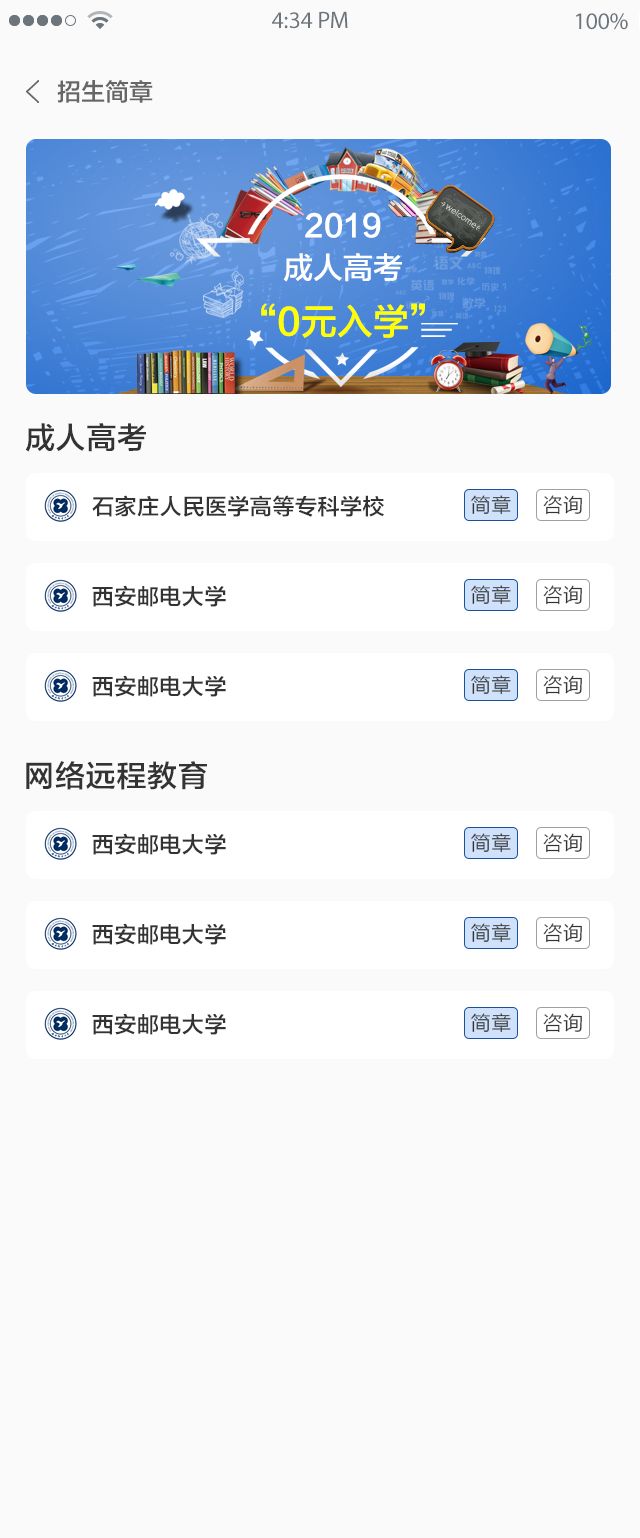
<style>
.page{position:relative;width:640px;height:1538px;background:#fafafa}
.page>*{position:absolute;margin:0}
.t1{font:24px "MyriadPro-Regular";color:#6c757b}
.t2{font:24px "FZLTZHK--GBK1-0";color:#666666}
.t3{font:30px "FZLTZHK--GBK1-0";letter-spacing:0.025em;color:#333333}
.t4{font:22px "FZLTZHK--GBK1-0";letter-spacing:0.025em;color:#333333}
.t5{font:20px "FZLTXHK";letter-spacing:0.025em;color:#333333}
</style>
<div class="page">
<p class="t1" style="left:272px;top:11px;width:76px;height:18px">4:34 PM</p>
<p class="t1" style="left:576px;top:13px;width:52px;height:17px">100%</p>
<p class="t2" style="left:57px;top:80px;width:96px;height:23px">招生简章</p>
<p class="t3" style="left:25px;top:423px;width:121px;height:29px">成人高考</p>
<p class="t4" style="left:92px;top:495px;width:292px;height:22px">石家庄人民医学高等专科学校</p>
<p class="t5" style="left:471px;top:495px;width:40px;height:20px">简章</p>
<p class="t5" style="left:543px;top:495px;width:39px;height:20px">咨询</p>
<p class="t4" style="left:92px;top:585px;width:134px;height:22px">西安邮电大学</p>
<p class="t5" style="left:471px;top:585px;width:40px;height:20px">简章</p>
<p class="t5" style="left:543px;top:585px;width:39px;height:20px">咨询</p>
<p class="t4" style="left:92px;top:675px;width:134px;height:22px">西安邮电大学</p>
<p class="t5" style="left:471px;top:675px;width:40px;height:20px">简章</p>
<p class="t5" style="left:543px;top:675px;width:39px;height:20px">咨询</p>
<p class="t3" style="left:26px;top:761px;width:181px;height:29px">网络远程教育</p>
<p class="t4" style="left:92px;top:833px;width:134px;height:22px">西安邮电大学</p>
<p class="t5" style="left:471px;top:833px;width:40px;height:20px">简章</p>
<p class="t5" style="left:543px;top:833px;width:39px;height:20px">咨询</p>
<p class="t4" style="left:92px;top:923px;width:134px;height:22px">西安邮电大学</p>
<p class="t5" style="left:471px;top:923px;width:40px;height:20px">简章</p>
<p class="t5" style="left:543px;top:923px;width:39px;height:20px">咨询</p>
<p class="t4" style="left:92px;top:1013px;width:134px;height:22px">西安邮电大学</p>
<p class="t5" style="left:471px;top:1013px;width:40px;height:20px">简章</p>
<p class="t5" style="left:543px;top:1013px;width:39px;height:20px">咨询</p>
</div>
